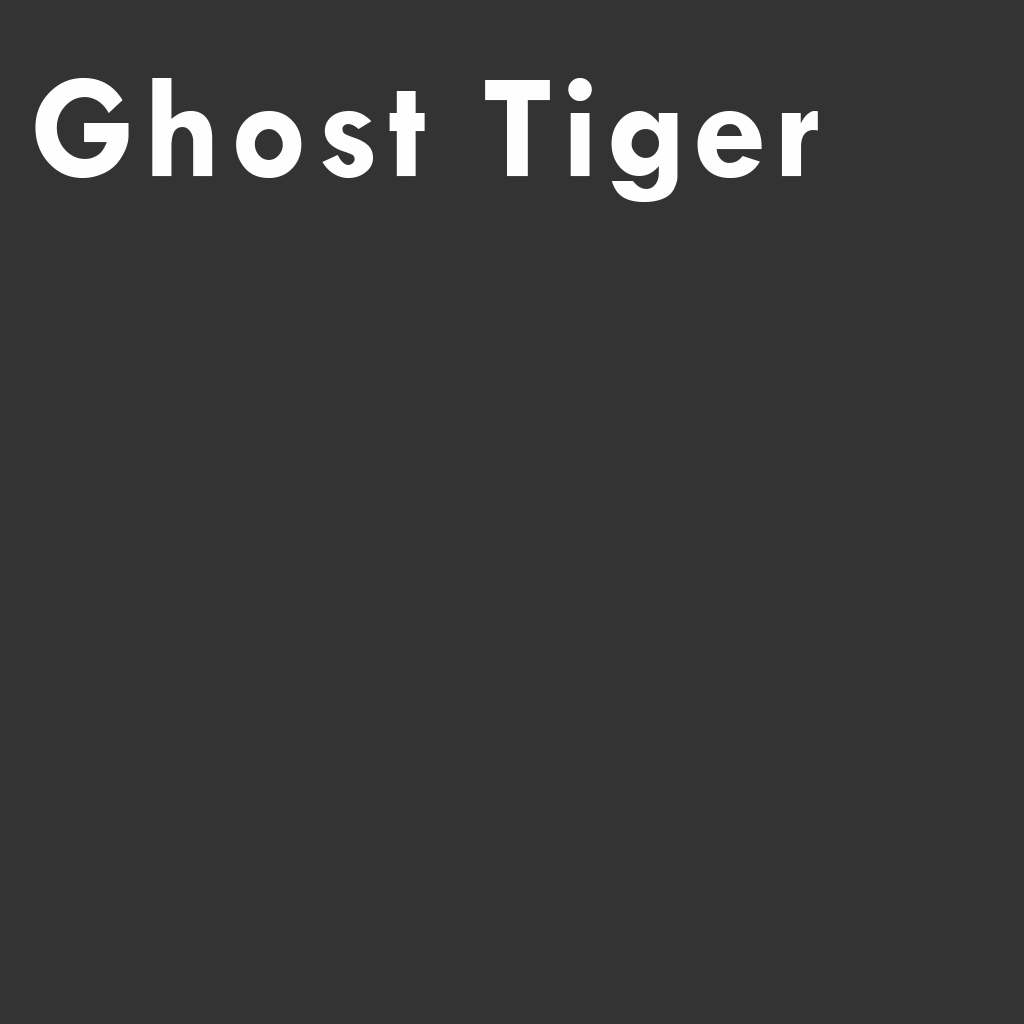
<style>
.page{position:relative;width:1024px;height:1024px;background:#333333}
.page>*{position:absolute;margin:0}
.t1{font:150px "TwCenMT-Bold";letter-spacing:0.05em;color:#fffefe}
</style>
<div class="page">
<p class="t1" style="left:35px;top:78px;width:783px;height:124px">Ghost Tiger</p>
</div>
